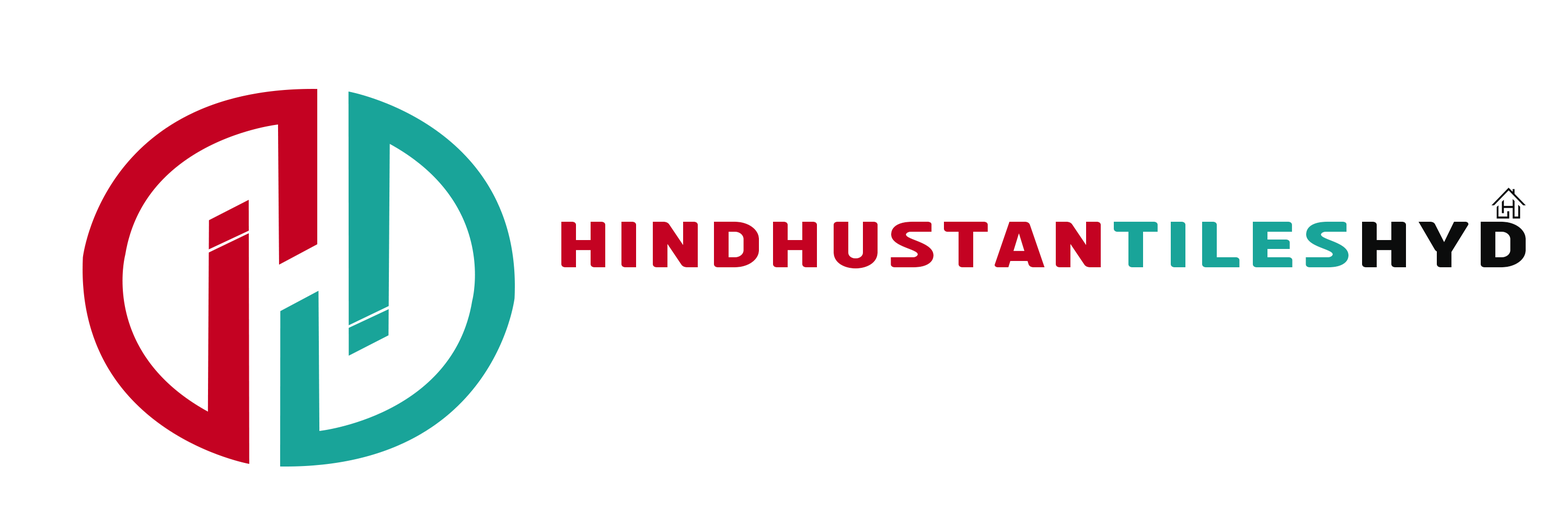
<style>
.page{position:relative;width:1568px;height:523px;background:#ffffff}
.page>*{position:absolute;margin:0}
.t1{font:58.5px "aAppleTea";letter-spacing:0.105em;color:#c40222;scale:1.25 1}
.t2{font:58.5px "aAppleTea";letter-spacing:0.105em;color:#19a499;scale:1.25 1}
.t3{font:58.5px "aAppleTea";letter-spacing:0.105em;color:#0b0c0c;scale:1.25 1}
</style>
<div class="page">
<p class="t1" style="left:561px;top:221px;width:965px;height:48px">hindhustan<span class="t2">tiles</span><span class="t3">hyd</span></p>
</div>
